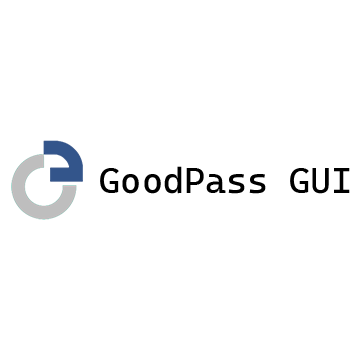
<style>
.page{position:relative;width:360px;height:360px;background:#ffffff}
.page>*{position:absolute;margin:0}
.t1{font:36px "CascadiaCode-Roman";color:#000000}
</style>
<div class="page">
<p class="t1" style="left:100px;top:166px;width:250px;height:28px">GoodPass GUI</p>
</div>
